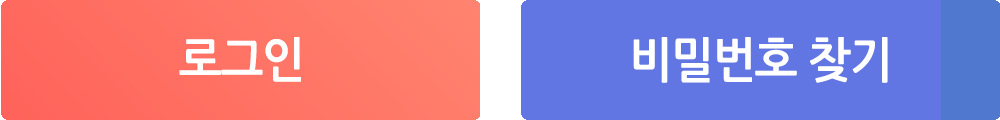
<style>
.page{position:relative;width:1000px;height:120px;background:#6176e3}
.page>*{position:absolute;margin:0}
.t1{font:48px "NanumGothicBold";letter-spacing:-0.025em;color:#ffffff;scale:0.95 1}
</style>
<div class="page">
<p class="t1" style="left:179px;top:37px;width:122px;height:45px">로그인</p>
<p class="t1" style="left:633px;top:37px;width:255px;height:46px">비밀번호 찾기</p>
</div>
